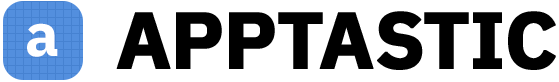
<style>
.page{position:relative;width:559px;height:82px;background:#ffffff}
.page>*{position:absolute;margin:0}
.t1{font:80px "IBMPlexSans-Bold";letter-spacing:-0.02em;color:#000000;font-weight:bold}
.t2{font:60px "IBMPlexSans-Bold";letter-spacing:-0.02em;color:#ffffff}
</style>
<div class="page">
<p class="t1" style="left:116px;top:11px;width:440px;height:59px">APPTASTIC</p>
<p class="t2" style="left:27px;top:23px;width:31px;height:34px">a</p>
</div>
